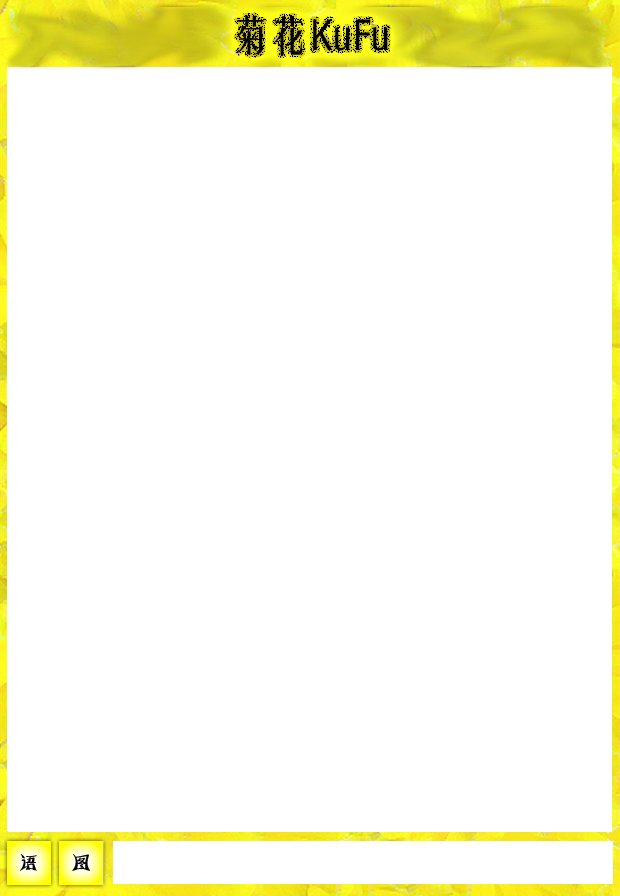
<style>
.page{position:relative;width:620px;height:896px;background:#ffffff}
.page>*{position:absolute;margin:0}
.t1{font:40.5px "FZYTK--GBK1-0";color:#000000}
.t2{font:21.5px "HYk5gj";color:#000000}
</style>
<div class="page">
<p class="t1" style="left:236px;top:15px;width:152px;height:40px">菊花KuFu</p>
<p class="t2" style="left:20px;top:854px;width:17px;height:17px">语</p>
<p class="t2" style="left:71px;top:854px;width:19px;height:18px">图</p>
</div>
